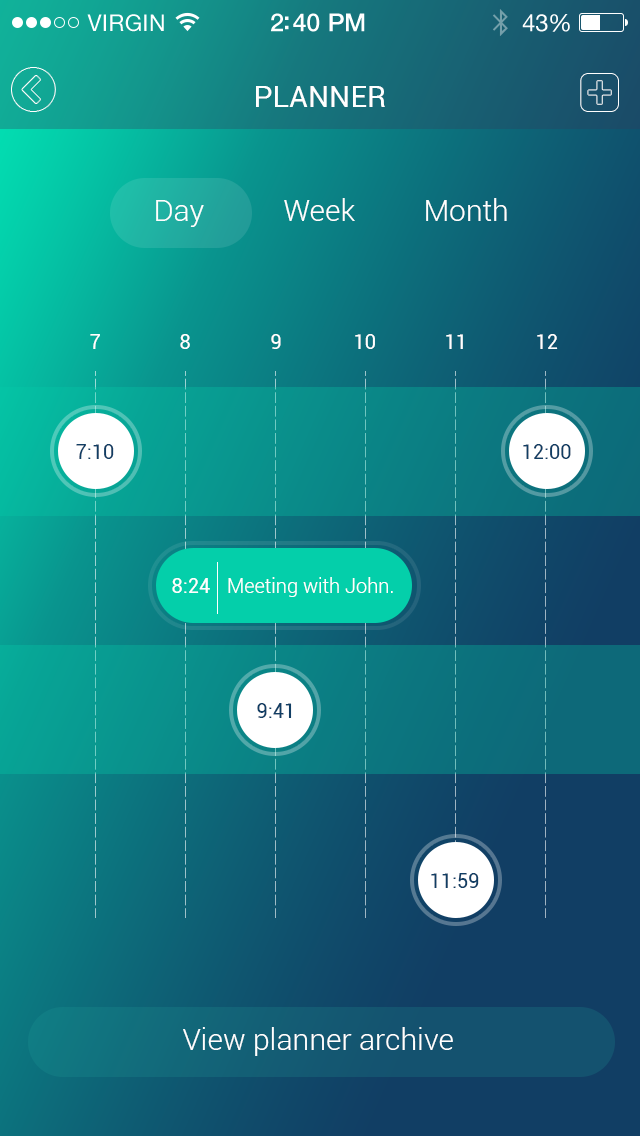
<style>
.page{position:relative;width:640px;height:1136px}
.page>*{position:absolute;margin:0}
.t1{font:30px "Roboto-Regular";color:#ffffff;text-transform:uppercase}
.t2{font:30px "Roboto-Light";color:#ffffff}
.t3{font:20px "Roboto-Regular";color:#ffffff;text-transform:uppercase}
.t4{font:20px "Roboto-Regular";color:#113e64;text-transform:uppercase}
.t5{font:20px "Roboto-Regular";color:#ffffff}
.t6{font:20px "Roboto-Light";color:#ffffff}
</style>
<div class="page">
<p class="t1" style="left:256px;top:86px;width:129px;height:21px">Planner</p>
<p class="t2" style="left:284px;top:198px;width:71px;height:23px">Week</p>
<p class="t2" style="left:426px;top:198px;width:81px;height:23px">Month</p>
<p class="t2" style="left:156px;top:200px;width:48px;height:27px">Day</p>
<p class="t3" style="left:90px;top:334px;width:10px;height:15px">7</p>
<p class="t3" style="left:180px;top:334px;width:10px;height:15px">8</p>
<p class="t3" style="left:271px;top:334px;width:10px;height:15px">9</p>
<p class="t3" style="left:355px;top:334px;width:20px;height:15px">10</p>
<p class="t3" style="left:446px;top:334px;width:17px;height:15px">11</p>
<p class="t3" style="left:537px;top:334px;width:21px;height:15px">12</p>
<p class="t4" style="left:76px;top:444px;width:38px;height:15px">7:10</p>
<p class="t4" style="left:523px;top:444px;width:48px;height:15px">12:00</p>
<p class="t5" style="left:172px;top:578px;width:38px;height:15px">8:24</p>
<p class="t6" style="left:228px;top:577px;width:165px;height:20px">Meeting with John.</p>
<p class="t4" style="left:257px;top:703px;width:35px;height:15px">9:41</p>
<p class="t4" style="left:431px;top:873px;width:48px;height:15px">11:59</p>
<p class="t2" style="left:183px;top:1027px;width:270px;height:29px">View planner archive</p>
</div>
